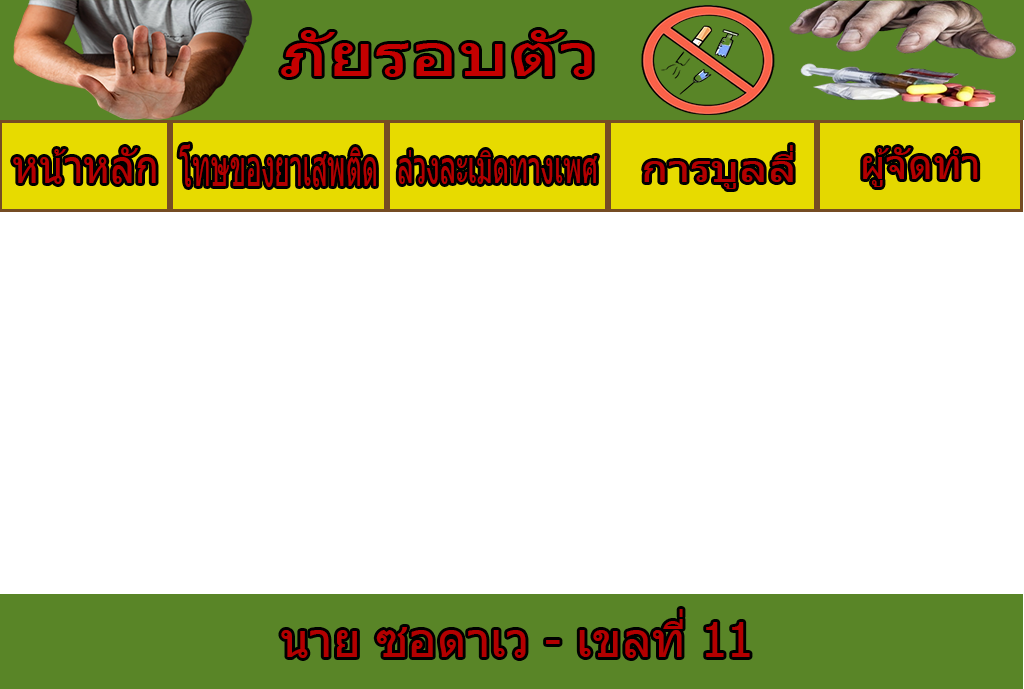
<style>
.page{position:relative;width:1024px;height:689px;background:#ffffff}
.page>*{position:absolute;margin:0}
.t1{font:58.5px "Tahoma";color:#c40000;scale:1.38 1}
.t2{font:45.2px "Tahoma";color:#b30000;scale:0.89 1}
.t3{font:50.7px "Tahoma";color:#b30000;scale:0.52 1}
.t4{font:43.7px "Tahoma";color:#b30000;scale:0.61 1}
.t5{font:36.7px "Tahoma";color:#b30000;scale:1.25 1}
.t6{font:39.8px "Tahoma";color:#b30000}
.t7{font:48px "Tahoma";color:#b30000}
</style>
<div class="page">
<p class="t1" style="left:281px;top:30px;width:311px;height:47px">ภัยรอบตัว</p>
<p class="t2" style="left:13px;top:147px;width:143px;height:37px">หน้าหลัก</p>
<p class="t3" style="left:179px;top:144px;width:197px;height:43px">โทษของยาเสพติด</p>
<p class="t4" style="left:398px;top:150px;width:199px;height:34px">ล่วงละเมิดทางเพศ</p>
<p class="t5" style="left:644px;top:145px;width:149px;height:44px">การบูลลี่</p>
<p class="t6" style="left:863px;top:147px;width:115px;height:40px">ผู้จัดทำ</p>
<p class="t7" style="left:281px;top:609px;width:469px;height:49px">นาย ซอดาเว - เขลที่ 11</p>
</div>
